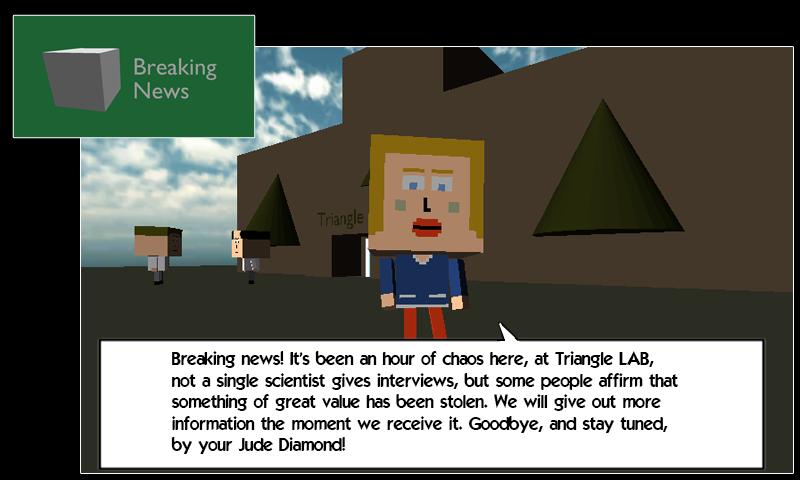
<style>
.page{position:relative;width:800px;height:480px;background:#433729}
.page>*{position:absolute;margin:0}
.t1{font:18px "ELEGANCE";color:#000000}
</style>
<div class="page">
<p class="t1" style="left:171px;top:351px;width:507px;height:103px">Breaking news! It's been an hour of chaos here, at Triangle LAB,<br>not a single scientist gives interviews, but some people affirm that<br>something of great value has been stolen. We will give out more <br>information the moment we receive it. Goodbye, and stay tuned,<br>by your Jude Diamond!</p>
</div>
